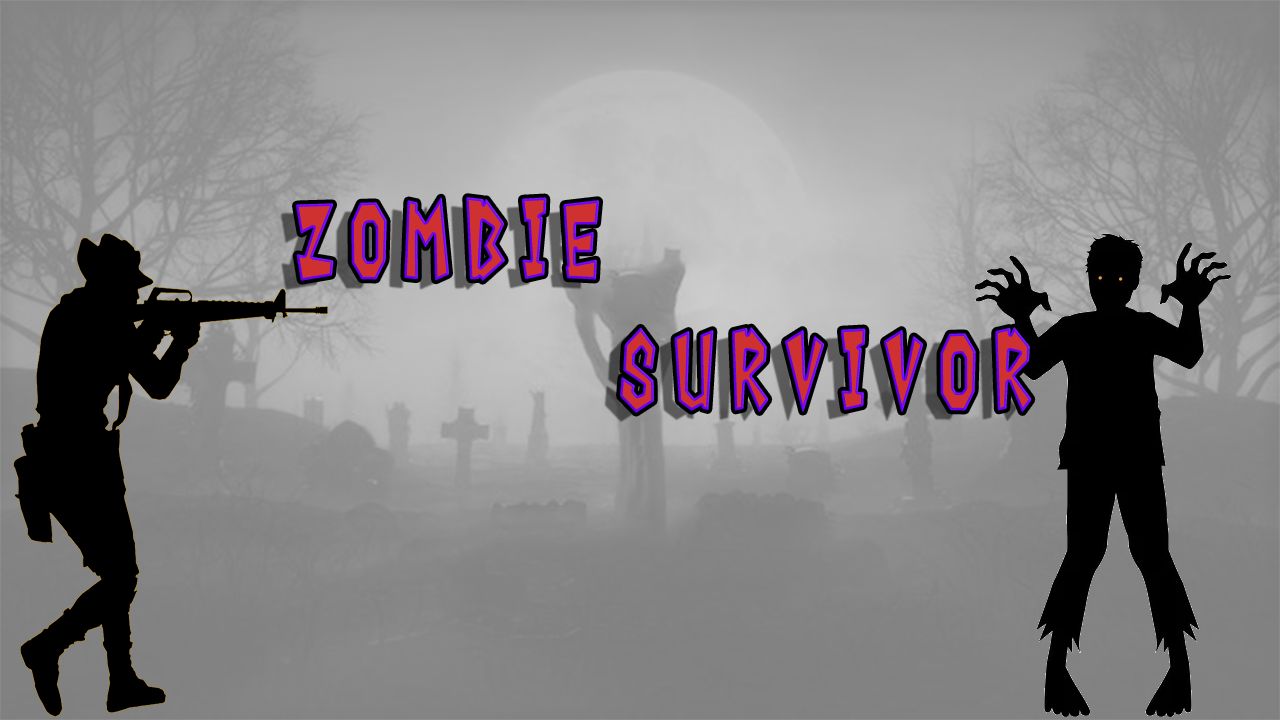
<style>
.page{position:relative;width:1280px;height:720px}
.page>*{position:absolute;margin:0}
.t1{font:93.9px/131.4px "AnnyantRoman";letter-spacing:0.3em;scale:0.58 1}
</style>
<div class="page">
<p class="t1" style="left:296px;top:197px;width:736px;height:216px">Zombie <br>            Survivor</p>
</div>
